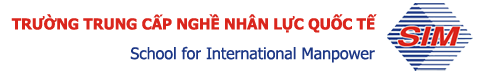
<style>
.page{position:relative;width:483px;height:76px;background:#ffffff}
.page>*{position:absolute;margin:0}
.t1{font:15px "Tahoma-Bold";color:#da251c}
.t2{font:16px "Tahoma";color:#1c3786}
</style>
<div class="page">
<p class="t1" style="left:11px;top:14px;width:366px;height:19px">TRƯỜNG TRUNG CẤP NGHỀ NHÂN LỰC QUỐC TẾ</p>
<p class="t2" style="left:130px;top:46px;width:245px;height:17px">School for International Manpower</p>
</div>
